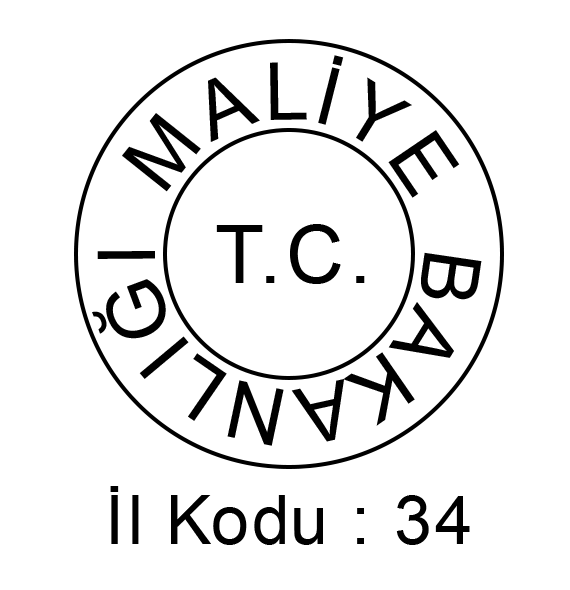
<style>
.page{position:relative;width:570px;height:590px;background:#ffffff}
.page>*{position:absolute;margin:0}
.t1{font:80px "ArialMT";letter-spacing:0.06em;color:#000000}
.t2{font:80px "ArialMT";letter-spacing:0.02em;color:#000000}
.t3{font:80px "ArialMT";letter-spacing:0.04em;color:#000000}
.t4{font:80px "ArialMT";color:#000000}
.t5{font:80px "ArialMT";letter-spacing:-0.02em;color:#000000}
.t6{font:67.7px "ArialMT";letter-spacing:0.06em;color:#000000}
.t7{font:67.7px "ArialMT";color:#000000}
</style>
<div class="page">
<p class="t1" style="left:92px;top:55px;width:390px;height:391px;rotate:-5deg">MA<span class="t2">L</span><span class="t3">İY</span><span class="t4">E </span><span class="t2"> BA</span><span class="t5">K</span><span class="t2">AN</span><span class="t3">LI</span>Ğ<span class="t4">I</span></p>
<p class="t1" style="left:216px;top:224px;width:149px;height:60px">T.C.</p>
<p class="t6" style="left:110px;top:486px;width:360px;height:59px">İl<span class="t7"> K</span>o<span class="t7">d</span>u : 34</p>
</div>
